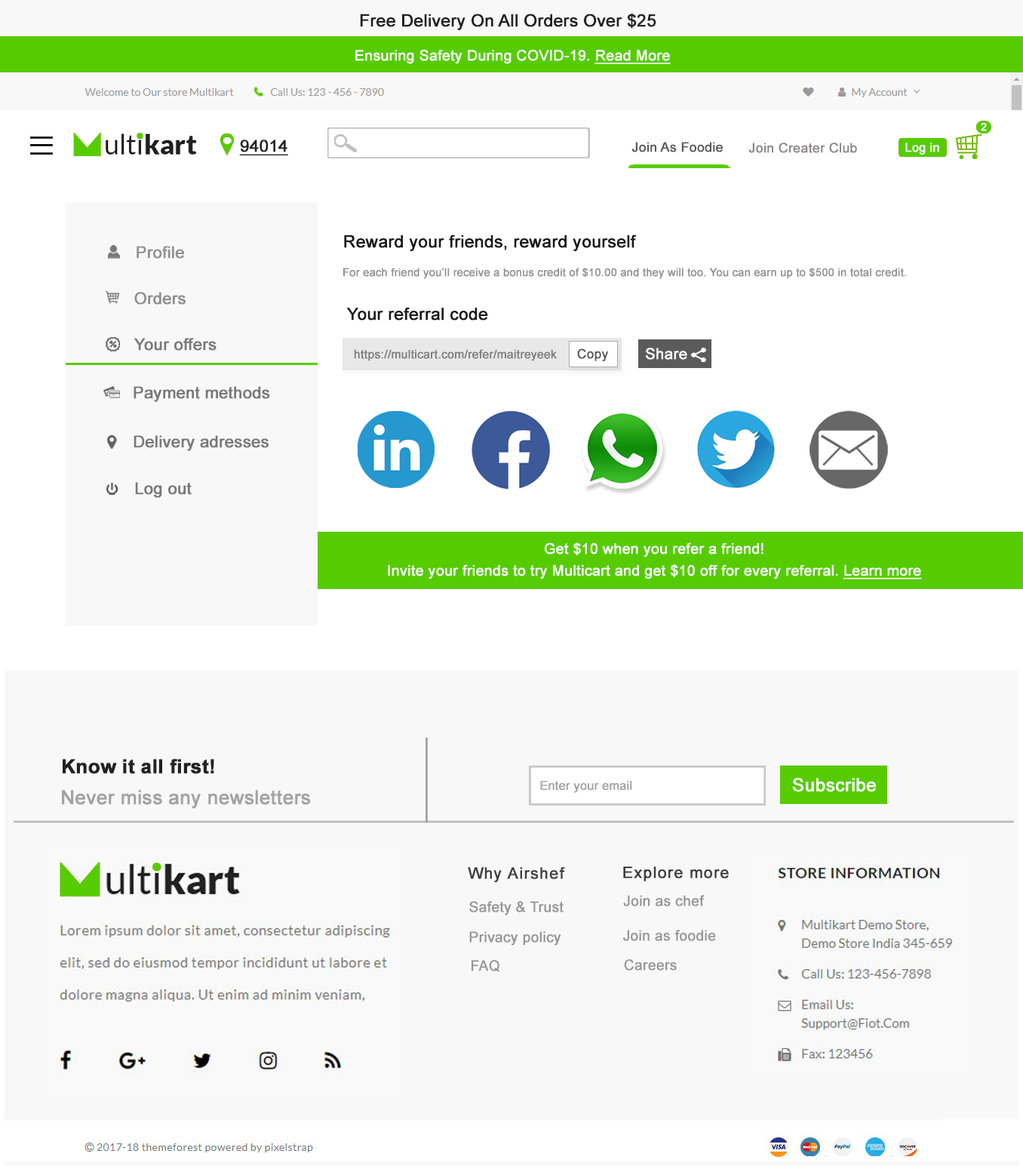
<style>
.page{position:relative;width:1023px;height:1166px;background:#f8f8f8}
.page>*{position:absolute;margin:0}
.t1{font:16.9px "ArialMT";color:#222222;font-weight:bold}
.t2{font:14.5px "ArialMT";color:#ffffff;font-weight:bold}
.t3{font:14.5px "ArialMT";color:#ffffff;font-weight:bold;text-decoration:underline}
.t4{font:10.7px "ArialMT";color:#ffffff;font-weight:bold}
.t5{font:16.5px "ArialMT";color:#222222;font-weight:bold;text-decoration:underline}
.t6{font:13.2px "ArialMT";color:#585757;font-weight:bold}
.t7{font:13.2px "ArialMT";color:#8a8888;font-weight:bold}
.t8{font:12.1px "ArialMT";color:#ffffff;font-weight:bold}
.t9{font:16.2px "ArialMT";color:#919191;font-weight:bold}
.t10{font:16.9px "ArialMT";color:#191919;font-weight:bold}
.t11{font:10.9px "ArialMT";color:#929292;font-weight:bold}
.t12{font:16.2px "ArialMT";color:#8e8e8e;font-weight:bold}
.t13{font:16.8px "ArialMT";color:#191919;font-weight:bold}
.t14{font:16.2px "ArialMT";color:#787878;font-weight:bold}
.t15{font:11.6px "ArialMT";color:#818181;font-weight:bold}
.t16{font:12.9px "ArialMT";color:#5c5b5b;font-weight:bold}
.t17{font:15.2px "ArialMT";color:#ffffff;font-weight:bold}
.t18{font:19.4px "Arial-BoldMT";color:#222222;font-weight:bold}
.t19{font:12px "ArialMT";color:#a3a2a2;font-weight:bold}
.t20{font:18.1px "ArialMT";color:#ffffff;font-weight:bold}
.t21{font:19.4px "ArialMT";color:#a3a2a2;font-weight:bold}
.t22{font:15.7px "ArialMT";letter-spacing:0.05em;color:#414141;font-weight:bold}
.t23{font:15.7px "ArialMT";letter-spacing:0.05em;color:#3e3e3e;font-weight:bold}
.t24{font:14.2px "ArialMT";color:#979696;font-weight:bold}
.t25{font:14.2px "ArialMT";color:#989797;font-weight:bold}
</style>
<div class="page">
<p class="t1" style="left:360px;top:14px;width:296px;height:16px">Free Delivery On All Orders Over $25</p>
<p class="t2" style="left:355px;top:50px;width:315px;height:14px">Ensuring Safety During COVID-19. <span class="t3">Read More</span></p>
<p class="t4" style="left:980px;top:123px;width:6px;height:8px">2</p>
<p class="t5" style="left:239px;top:140px;width:49px;height:15px">94014</p>
<p class="t6" style="left:631px;top:142px;width:92px;height:10px">Join As Foodie</p>
<p class="t7" style="left:748px;top:143px;width:109px;height:10px">Join Creater Club</p>
<p class="t8" style="left:905px;top:143px;width:34px;height:12px">Log in</p>
<p class="t9" style="left:137px;top:246px;width:47px;height:13px">Profile</p>
<p class="t10" style="left:344px;top:235px;width:293px;height:16px">Reward your friends, reward yourself</p>
<p class="t11" style="left:343px;top:268px;width:563px;height:11px">For each friend you’ll receive a bonus credit of $10.00 and they will too. You can earn up to $500 in total credit.</p>
<p class="t12" style="left:134px;top:292px;width:52px;height:13px">Orders</p>
<p class="t13" style="left:346px;top:307px;width:142px;height:14px">Your referral code</p>
<p class="t14" style="left:133px;top:338px;width:83px;height:13px">Your offers</p>
<p class="t15" style="left:354px;top:349px;width:203px;height:12px">https://multicart.com/refer/maitreyeek</p>
<p class="t16" style="left:577px;top:348px;width:31px;height:13px">Copy</p>
<p class="t17" style="left:646px;top:348px;width:41px;height:12px">Share</p>
<p class="t14" style="left:133px;top:386px;width:137px;height:16px">Payment methods</p>
<p class="t14" style="left:133px;top:435px;width:135px;height:16px">Delivery adresses</p>
<p class="t14" style="left:135px;top:482px;width:57px;height:16px">Log out</p>
<p class="t2" style="left:388px;top:542px;width:534px;height:37px;text-align:center">Get $10 when you refer a friend!<br>Invite your friends to try Multicart and get $10 off for every referral. <span class="t3">Learn more</span></p>
<p class="t18" style="left:63px;top:759px;width:151px;height:15px">Know it all first!</p>
<p class="t19" style="left:540px;top:781px;width:92px;height:12px">Enter your email</p>
<p class="t20" style="left:792px;top:778px;width:84px;height:14px">Subscribe</p>
<p class="t21" style="left:62px;top:790px;width:249px;height:18px">Never miss any newsletters</p>
<p class="t22" style="left:468px;top:867px;width:97px;height:15px">Why Airshef</p>
<p class="t23" style="left:623px;top:867px;width:106px;height:15px">Explore more</p>
<p class="t24" style="left:469px;top:901px;width:94px;height:15px">Safety &amp; Trust</p>
<p class="t25" style="left:623px;top:895px;width:81px;height:12px">Join as chef</p>
<p class="t25" style="left:623px;top:930px;width:93px;height:11px">Join as foodie</p>
<p class="t24" style="left:469px;top:931px;width:92px;height:15px">Privacy policy</p>
<p class="t24" style="left:471px;top:960px;width:28px;height:12px">FAQ</p>
<p class="t25" style="left:624px;top:959px;width:53px;height:12px">Careers</p>
</div>
